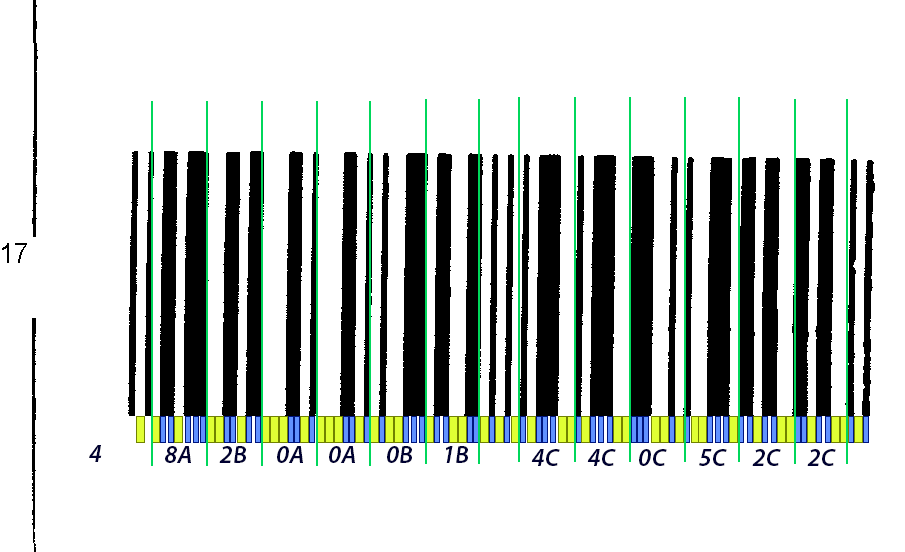
<style>
.page{position:relative;width:905px;height:552px;background:#ffffff}
.page>*{position:absolute;margin:0}
.t1{font:25px "MyriadPro-SemiboldIt";color:#000131}
</style>
<div class="page">
<p class="t1" style="left:89px;top:445px;width:13px;height:17px">4</p>
<p class="t1" style="left:165px;top:446px;width:26px;height:17px">8A</p>
<p class="t1" style="left:219px;top:446px;width:27px;height:17px">2B</p>
<p class="t1" style="left:277px;top:446px;width:26px;height:17px">0A</p>
<p class="t1" style="left:329px;top:446px;width:26px;height:17px">0A</p>
<p class="t1" style="left:387px;top:446px;width:25px;height:17px">0B</p>
<p class="t1" style="left:446px;top:446px;width:22px;height:17px">1B</p>
<p class="t1" style="left:531px;top:449px;width:29px;height:17px">4C</p>
<p class="t1" style="left:587px;top:449px;width:29px;height:17px">4C</p>
<p class="t1" style="left:639px;top:449px;width:28px;height:17px">0C</p>
<p class="t1" style="left:699px;top:449px;width:28px;height:17px">5C</p>
<p class="t1" style="left:752px;top:449px;width:29px;height:17px">2C</p>
<p class="t1" style="left:807px;top:449px;width:29px;height:17px">2C</p>
</div>
